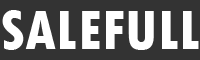
<style>
.page{position:relative;width:200px;height:60px;background:#333333}
.page>*{position:absolute;margin:0}
.t1{font:58.4px "TwCenMT-CondensedExtraBold";color:#ffffff}
</style>
<div class="page">
<p class="t1" style="left:2px;top:10px;width:197px;height:40px">SALEFULL</p>
</div>
